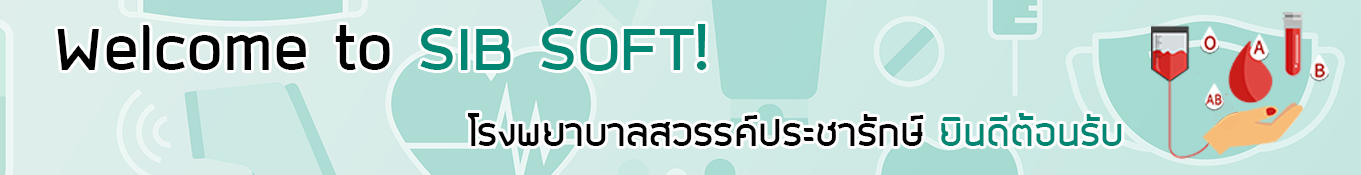
<style>
.page{position:relative;width:1361px;height:175px}
.page>*{position:absolute;margin:0}
.t1{font:72.8px "SuperspaceBold";color:#000000}
.t2{font:72.8px "SuperspaceBold";color:#008773}
.t3{font:44.5px "SuperspaceBold";color:#000000}
.t4{font:44.5px "SuperspaceBold";color:#008773}
</style>
<div class="page">
<p class="t1" style="left:57px;top:24px;width:650px;height:47px">Welcome to <span class="t2">SIB SOFT!</span></p>
<p class="t3" style="left:468px;top:113px;width:654px;height:33px">โรงพยาบาลสวรรค์ประชารักษ์ <span class="t4">ยินดีต้อนรับ</span></p>
</div>
